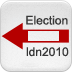
<style>
.page{position:relative;width:72px;height:72px}
.page>*{position:absolute;margin:0}
.t1{font:12px "ArialMT";color:#373737}
</style>
<div class="page">
<p class="t1" style="left:26px;top:15px;width:42px;height:10px">Election</p>
<p class="t1" style="left:26px;top:47px;width:43px;height:10px">ldn2010</p>
</div>
